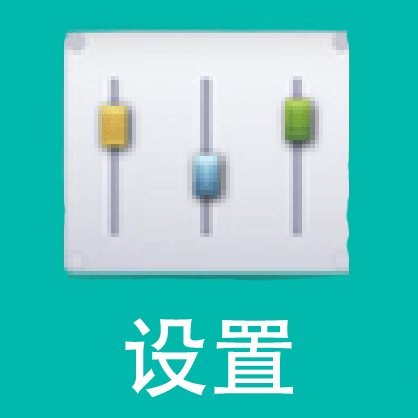
<style>
.page{position:relative;width:418px;height:418px;background:#00b8ac}
.page>*{position:absolute;margin:0}
.t1{font:88px "AdobeHeitiStd-Regular";color:#ffffff}
</style>
<div class="page">
<p class="t1" style="left:125px;top:318px;width:168px;height:80px">设置</p>
</div>
